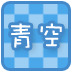
<style>
.page{position:relative;width:72px;height:72px;background:#448aca}
.page>*{position:absolute;margin:0}
.t1{font:30px "DFCraftYu-W5-WING-RKSJ-H";color:#ffffff}
</style>
<div class="page">
<p class="t1" style="left:11px;top:23px;width:51px;height:25px">青空</p>
</div>
